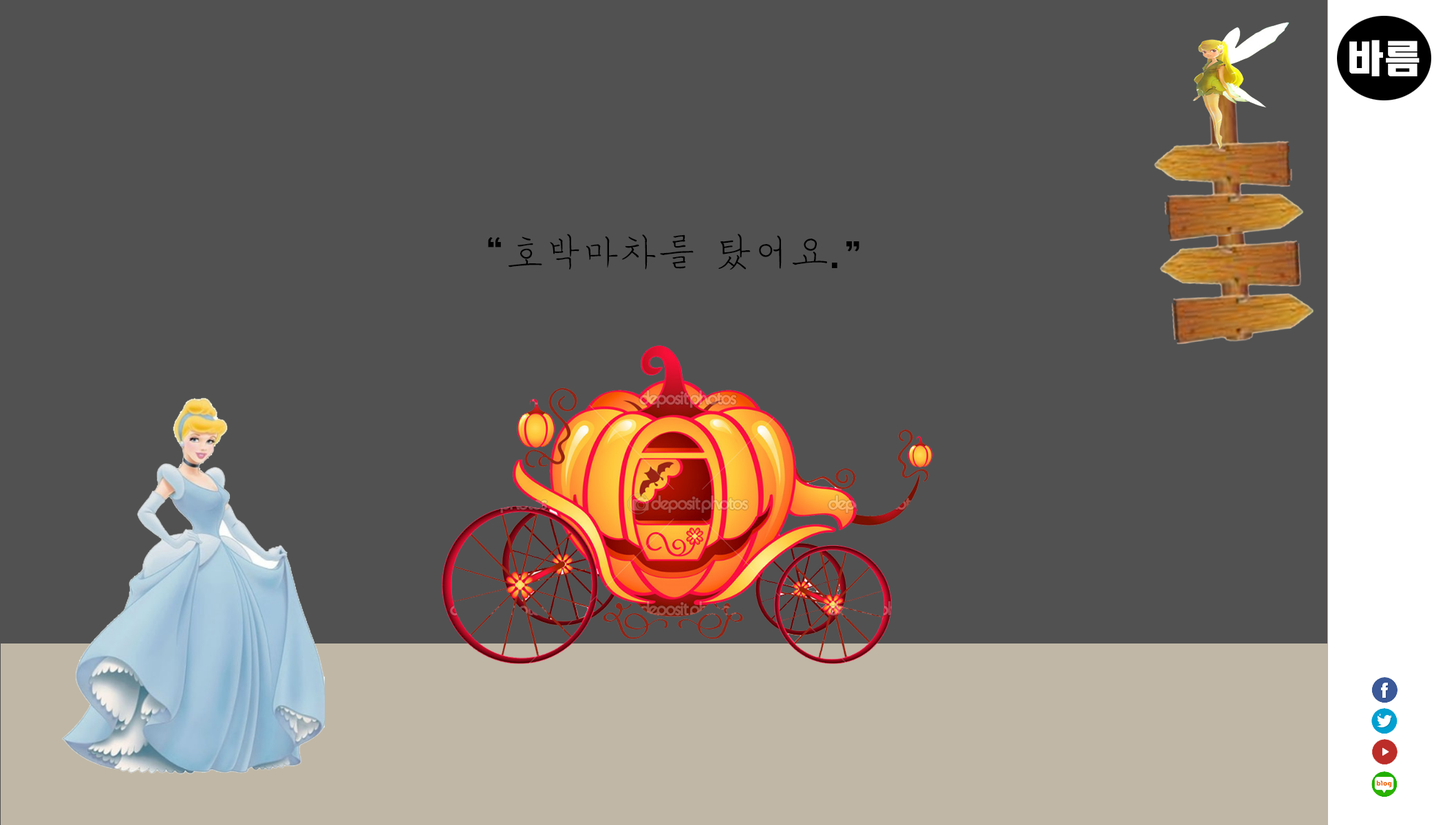
<style>
.page{position:relative;width:1445px;height:825px;background:#515151}
.page>*{position:absolute;margin:0}
.t1{font:37.8px "MSugiJeong";color:#000000}
.t2{font:37.8px "HeadlineR-HM";color:#000000}
</style>
<div class="page">
<p class="t1" style="left:488px;top:234px;width:371px;height:36px"><span class="t2">“</span>호박마차를 탔어요<span class="t2">.”</span></p>
</div>
